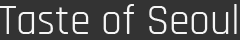
<style>
.page{position:relative;width:240px;height:40px;background:#333333}
.page>*{position:absolute;margin:0}
.t1{font:41.7px "Rajdhani-Regular";color:#f5f5f5}
</style>
<div class="page">
<p class="t1" style="left:0px;top:4px;width:237px;height:30px">Taste of Seoul</p>
</div>
